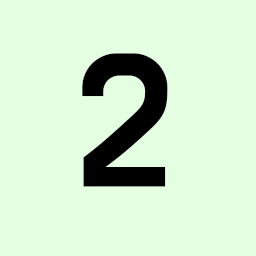
<style>
.page{position:relative;width:256px;height:256px;background:#e4fee2}
.page>*{position:absolute;margin:0}
.t1{font:153.3px "BMDoHyeon";color:#000000}
</style>
<div class="page">
<p class="t1" style="left:82px;top:53px;width:86px;height:134px">2</p>
</div>
